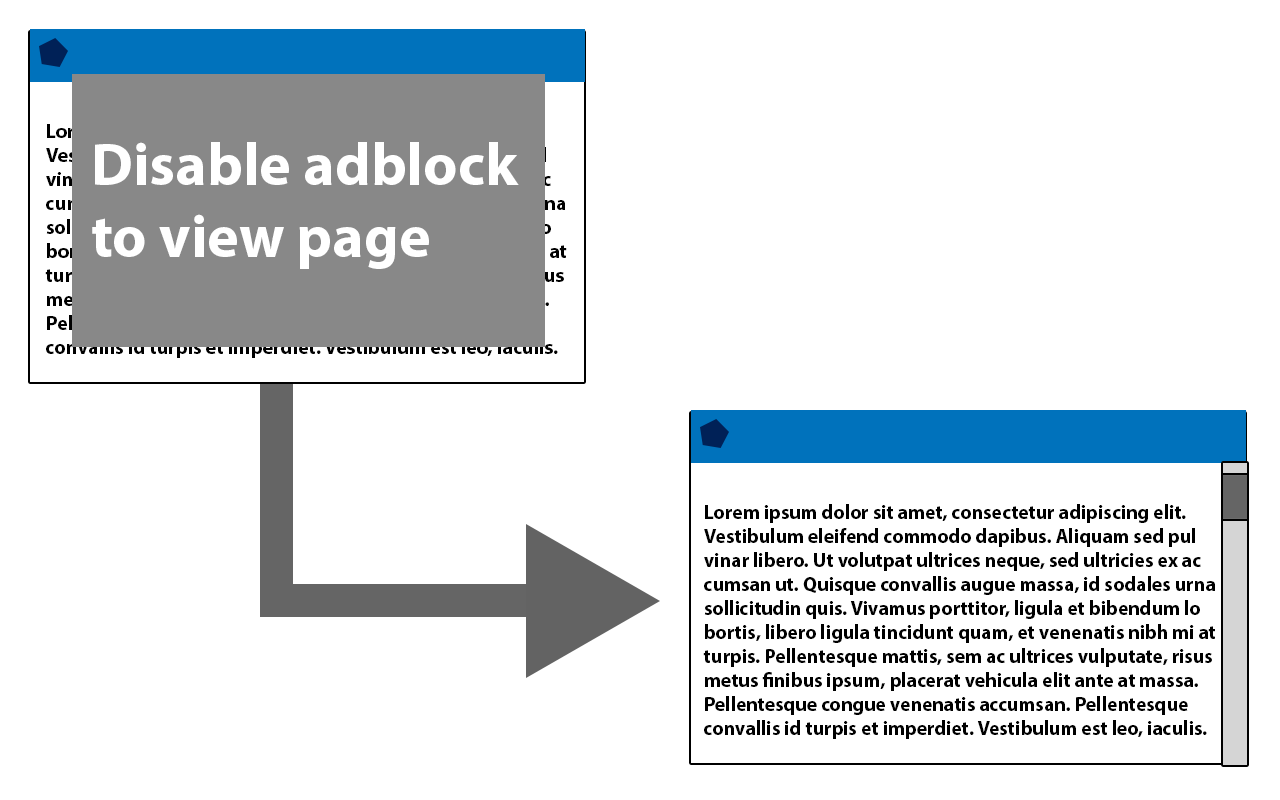
<style>
.page{position:relative;width:1280px;height:800px;background:#ffffff}
.page>*{position:absolute;margin:0}
.t1{font:60px "MyriadPro-Bold";color:#ffffff}
.t2{font:20px "MyriadPro-Bold";color:#000000}
</style>
<div class="page">
<p class="t1" style="left:92px;top:142px;width:427px;height:127px">Disable adblock<br>to view page</p>
<p class="t2" style="left:703px;top:504px;width:512px;height:235px">Lorem ipsum dolor sit amet, consectetur adipiscing elit. <br>Vestibulum eleifend commodo dapibus. Aliquam sed pul<br>vinar libero. Ut volutpat ultrices neque, sed ultricies ex ac<br>cumsan ut. Quisque convallis augue massa, id sodales urna <br>sollicitudin quis. Vivamus porttitor, ligula et bibendum lo<br>bortis, libero ligula tincidunt quam, et venenatis nibh mi at <br>turpis. Pellentesque mattis, sem ac ultrices vulputate, risus <br>metus finibus ipsum, placerat vehicula elit ante at massa. <br>Pellentesque congue venenatis accumsan. Pellentesque <br>convallis id turpis et imperdiet. Vestibulum est leo, iaculis.</p>
</div>
